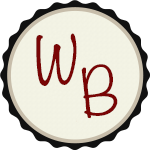
<style>
.page{position:relative;width:150px;height:150px;background:#ffffff}
.page>*{position:absolute;margin:0}
.t1{font:60px "Noteworthy-Light";color:#790505}
</style>
<div class="page">
<p class="t1" style="left:36px;top:33px;width:41px;height:53px;rotate:1deg">W</p>
<p class="t1" style="left:81px;top:64px;width:37px;height:55px;rotate:-6deg">B</p>
</div>
